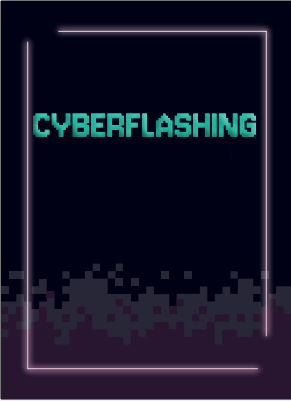
<style>
.page{position:relative;width:291px;height:401px;background:#000115}
.page>*{position:absolute;margin:0}
.t1{font:43.3px "Jersey10-Regular"}
</style>
<div class="page">
<p class="t1" style="left:33px;top:113px;width:224px;height:24px">CYBERFLASHING</p>
</div>
